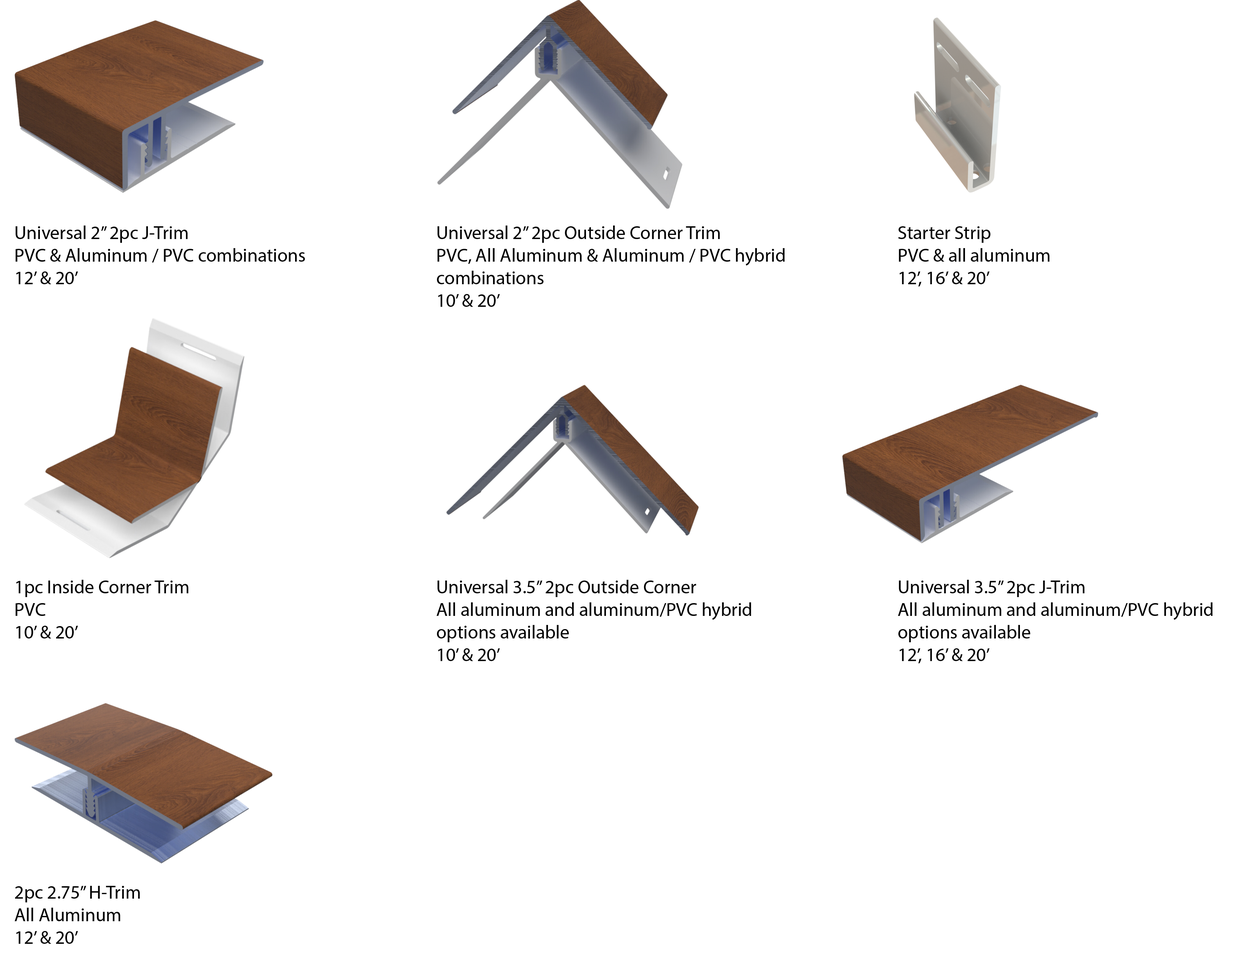
<style>
.page{position:relative;width:1242px;height:960px;background:#ffffff}
.page>*{position:absolute;margin:0}
.t1{font:18.8px "MyriadPro-Regular";color:#000000}
</style>
<div class="page">
<p class="t1" style="left:15px;top:225px;width:290px;height:59px">Universal 2” 2pc J-Trim<br>PVC &amp; Aluminum / PVC combinations<br>12’ &amp; 20’</p>
<p class="t1" style="left:437px;top:225px;width:348px;height:82px">Universal 2” 2pc Outside Corner Trim<br>PVC, All Aluminum &amp; Aluminum / PVC hybrid combinations<br>10’ &amp; 20’</p>
<p class="t1" style="left:898px;top:226px;width:152px;height:60px">Starter Strip<br>PVC &amp; all aluminum<br>12’, 16’ &amp; 20’</p>
<p class="t1" style="left:15px;top:580px;width:174px;height:58px">1pc Inside Corner Trim<br>PVC<br>10’ &amp; 20’</p>
<p class="t1" style="left:437px;top:580px;width:314px;height:81px">Universal 3.5” 2pc Outside Corner<br>All aluminum and aluminum/PVC hybrid options available  <br>10’ &amp; 20’</p>
<p class="t1" style="left:898px;top:580px;width:315px;height:83px">Universal 3.5” 2pc J-Trim<br>All aluminum and aluminum/PVC hybrid options available<br>12’, 16’ &amp; 20’</p>
<p class="t1" style="left:15px;top:886px;width:125px;height:58px">2pc 2.75” H-Trim<br>All Aluminum<br>12’ &amp; 20’</p>
</div>
